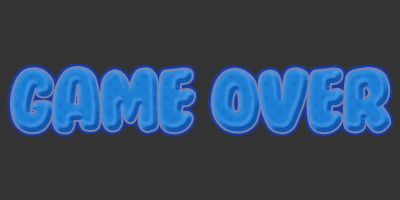
<style>
.page{position:relative;width:400px;height:200px;background:#333333}
.page>*{position:absolute;margin:0}
.t1{font:80px "BubbleGum";letter-spacing:-0.05em}
</style>
<div class="page">
<p class="t1" style="left:12px;top:68px;width:378px;height:65px">Game Over</p>
</div>
